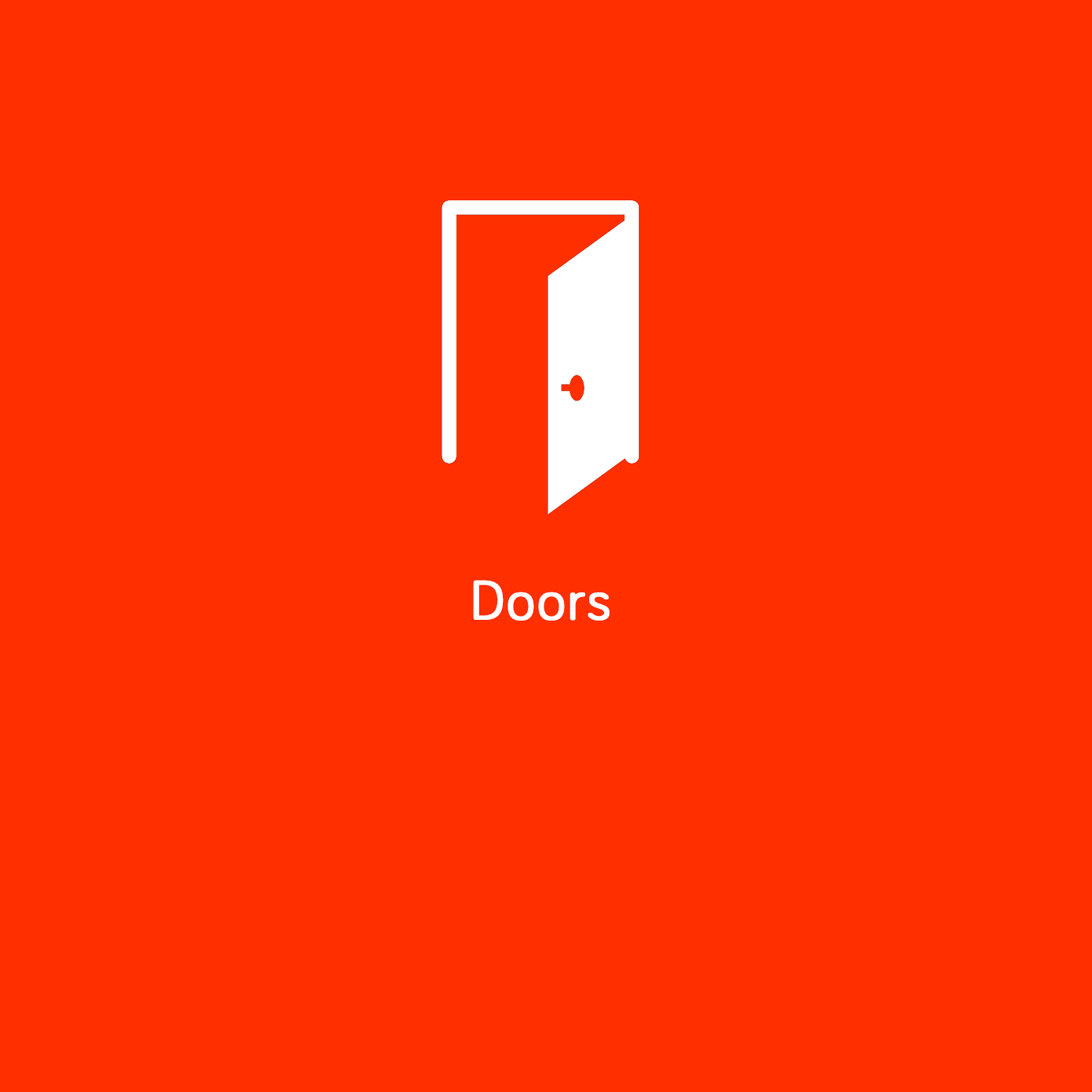
<style>
.page{position:relative;width:1092px;height:1092px;background:#ff2f00}
.page>*{position:absolute;margin:0}
.t1{font:57.3px "Bariol-Regular";letter-spacing:0.01em;color:#ffffff;font-weight:bold}
</style>
<div class="page">
<p class="t1" style="left:473px;top:580px;width:137px;height:41px">Doors</p>
</div>
